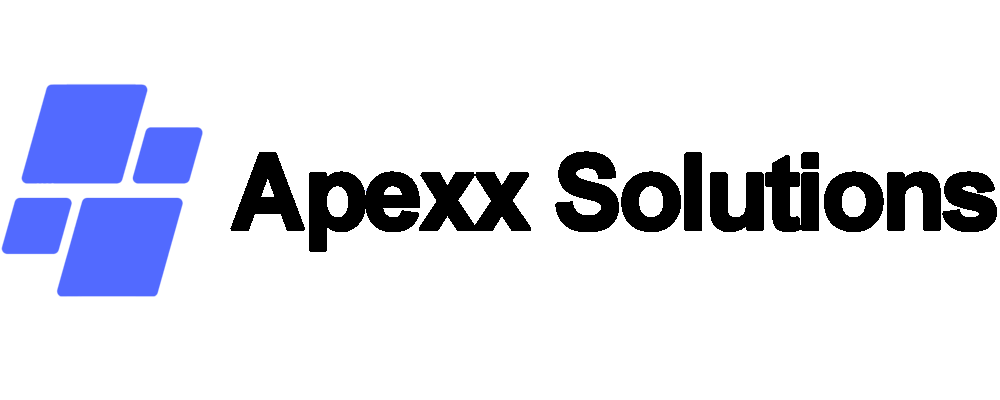
<style>
.page{position:relative;width:1000px;height:400px;background:#ffffff}
.page>*{position:absolute;margin:0}
.t1{font:104.2px "Arial-BoldMT";letter-spacing:-0.06em;color:#000000;font-weight:bold}
</style>
<div class="page">
<p class="t1" style="left:230px;top:151px;width:767px;height:101px">Apexx Solutions</p>
</div>
